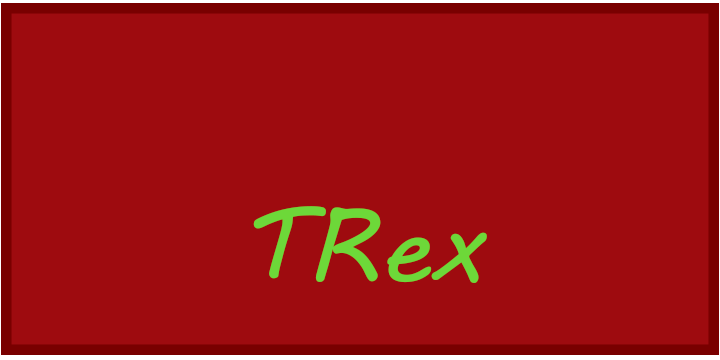
<style>
.page{position:relative;width:720px;height:360px;background:#9e0b0f}
.page>*{position:absolute;margin:0}
.t1{font:100px "MVBoli";color:#6dd839;scale:1.06 1}
</style>
<div class="page">
<p class="t1" style="left:253px;top:206px;width:234px;height:77px">TRex</p>
</div>
